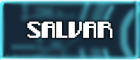
<style>
.page{position:relative;width:140px;height:60px}
.page>*{position:absolute;margin:0}
.t1{font:11.2px "Pixel-Noir-Regular";color:#ffffff;font-weight:bold;scale:1.25 1}
</style>
<div class="page">
<p class="t1" style="left:27px;top:21px;width:86px;height:17px">SALVAR</p>
</div>
